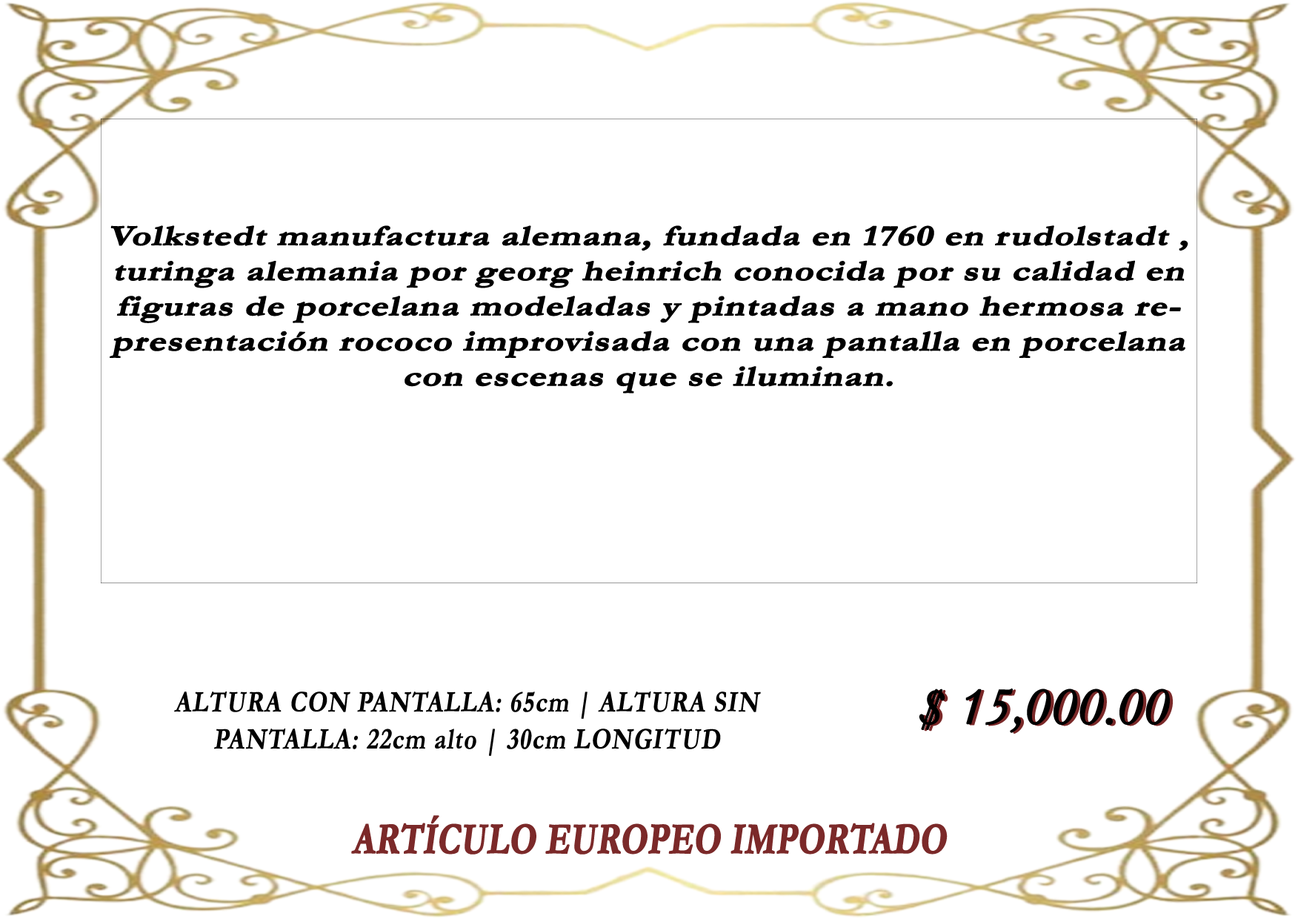
<style>
.page{position:relative;width:1298px;height:919px;background:#ffffff}
.page>*{position:absolute;margin:0}
.t1{font:29px/35.1px "Garamond-Bold";letter-spacing:0.005em;color:#000000;font-weight:bold;font-style:italic;scale:1.27 1}
.t2{font:53.3px "Garamond-Italic";color:#000000;font-weight:bold}
.t3{font:53.3px "Garamond-Italic";font-weight:bold}
.t4{font:29.6px/37px "Garamond-Bold";letter-spacing:0.025em;color:#000000;font-weight:bold;font-style:italic;scale:0.81 1}
.t5{font:44.5px "Garamond-Bold";color:#7b2929;font-weight:bold;font-style:italic;scale:0.75 1}
</style>
<div class="page">
<p class="t1" style="left:110px;top:225px;width:1078px;height:168px;text-align:center">Volkstedt manufactura alemana, fundada en 1760 en rudolstadt , turinga alemania por georg heinrich conocida por su calidad en figuras de porcelana modeladas y pintadas a mano hermosa representación rococo improvisada con una pantalla en porcelana con escenas que se iluminan.</p>
<p class="t2" style="left:919px;top:688px;width:251px;height:45px">$ 15,000.00</p>
<p class="t3" style="left:922px;top:689px;width:251px;height:44px">$ 15,000.00</p>
<p class="t4" style="left:174px;top:691px;width:587px;height:65px;text-align:center">ALTURA CON PANTALLA: 65cm | ALTURA SIN PANTALLA: 22cm alto | 30cm LONGITUD</p>
<p class="t5" style="left:351px;top:815px;width:597px;height:39px">ARTÍCULO EUROPEO IMPORTADO</p>
</div>
